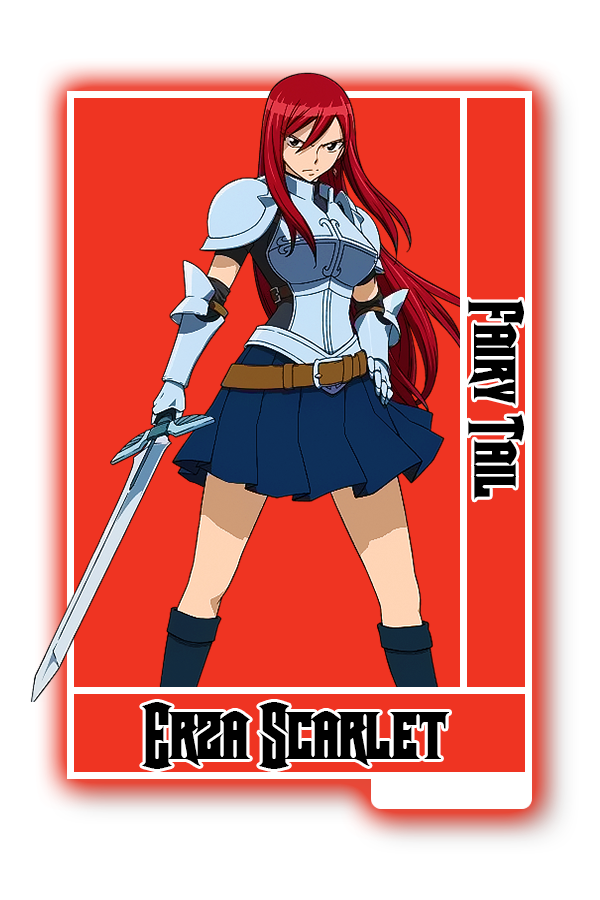
<style>
.page{position:relative;width:600px;height:900px;background:#ef3422}
.page>*{position:absolute;margin:0}
.t1{font:61.5px "Crown-Title";color:#000000}
.t2{font:70.1px "Crown-Title";color:#000000}
</style>
<div class="page">
<p class="t1" style="left:468px;top:299px;width:56px;height:201px;rotate:90deg">Fairy Tail</p>
<p class="t2" style="left:142px;top:702px;width:307px;height:67px">Erza Scarlet</p>
</div>
